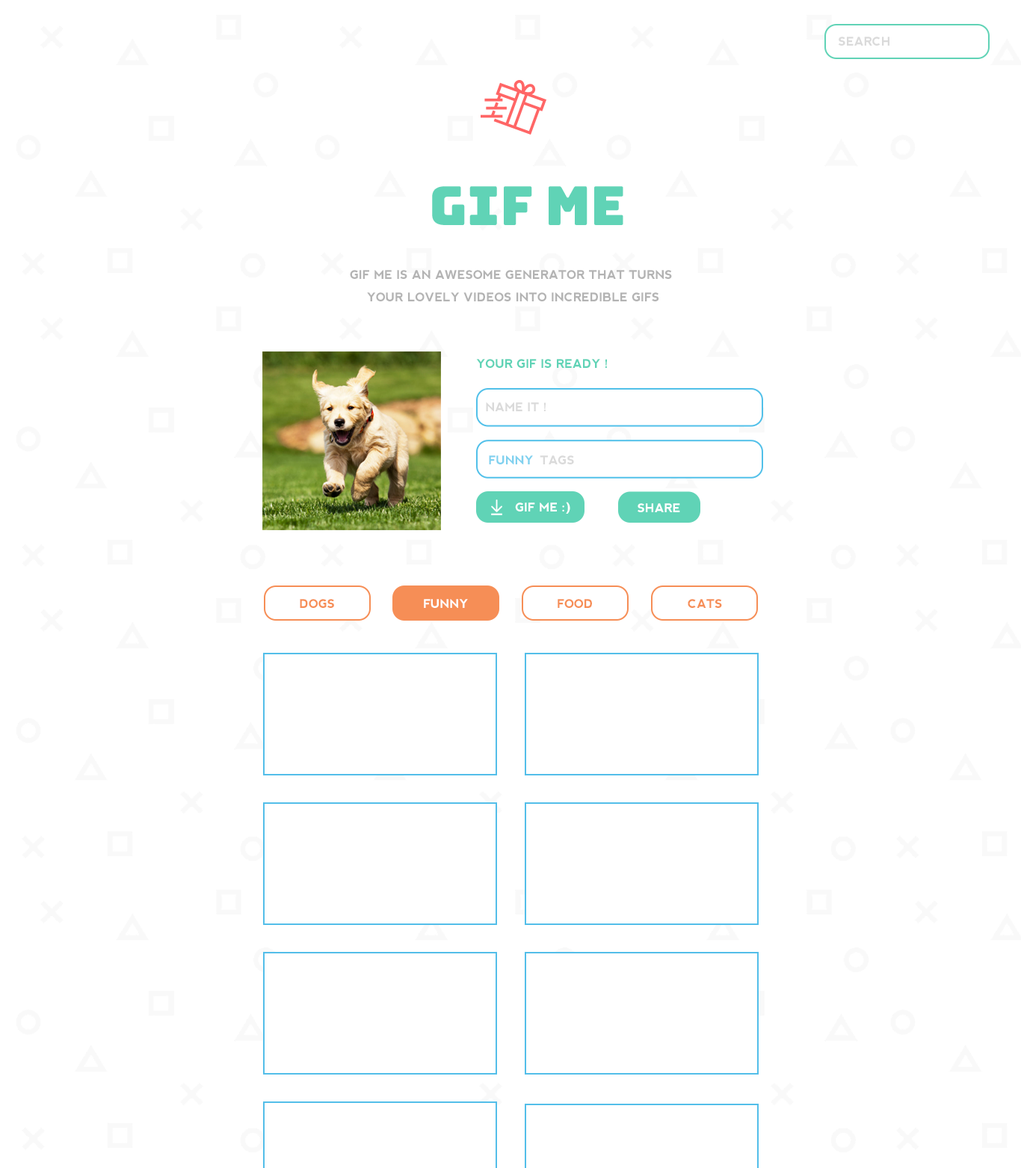
<style>
.page{position:relative;width:1021px;height:1168px;background:#ffffff}
.page>*{position:absolute;margin:0}
.t1{font:12px "nevis-Bold";color:#dadada;text-transform:uppercase}
.t2{font:53.8px "Bungee-Regular";color:#60d3b6;text-transform:uppercase}
.t3{font:12px/22.4px "nevis-Bold";color:#b3b3b3;text-transform:uppercase}
.t4{font:12px "nevis-Bold";color:#60d3b6;text-transform:uppercase}
.t5{font:12px "nevis-Bold";color:#80d1ef;text-transform:uppercase}
.t6{font:12px "nevis-Bold";color:#ffffff;text-transform:uppercase}
.t7{font:12px "nevis-Bold";color:#f68e56;text-transform:uppercase}
</style>
<div class="page">
<p class="t1" style="left:838px;top:37px;width:52px;height:9px">search</p>
<p class="t2" style="left:432px;top:186px;width:191px;height:39px">GIF ME</p>
<p class="t3" style="left:350px;top:270px;width:322px;height:31px;text-align:center">gif me is an awesome generator that turns <br>your lovely videos into incredible gifs</p>
<p class="t4" style="left:476px;top:359px;width:131px;height:9px">your gif is ready !</p>
<p class="t1" style="left:486px;top:402px;width:60px;height:9px">name it !</p>
<p class="t5" style="left:489px;top:455px;width:44px;height:9px">funny</p>
<p class="t1" style="left:540px;top:455px;width:34px;height:9px">tags</p>
<p class="t6" style="left:515px;top:502px;width:55px;height:12px">gif me :)</p>
<p class="t6" style="left:638px;top:503px;width:42px;height:9px">share</p>
<p class="t7" style="left:300px;top:599px;width:34px;height:9px">dogs</p>
<p class="t6" style="left:424px;top:599px;width:44px;height:9px">funny</p>
<p class="t7" style="left:558px;top:599px;width:34px;height:9px">food</p>
<p class="t7" style="left:688px;top:599px;width:34px;height:9px">cats</p>
</div>
